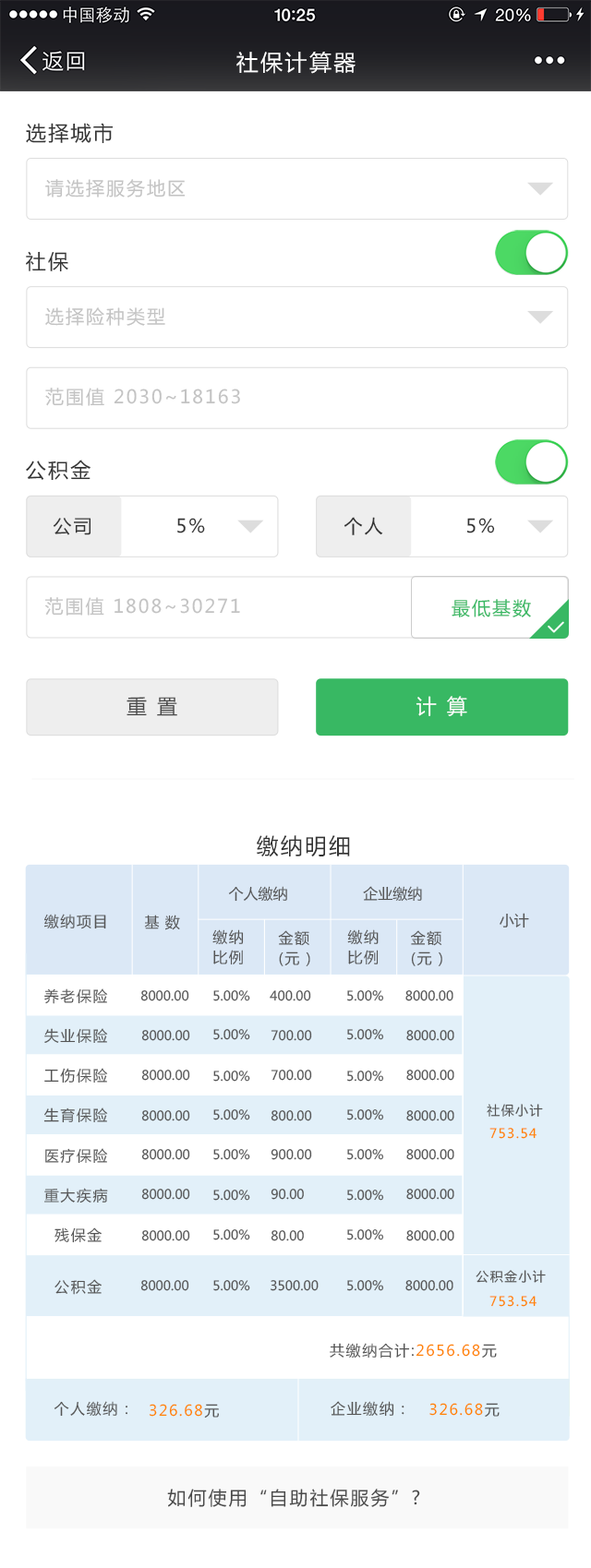
<style>
.page{position:relative;width:591px;height:1568px;background:#ffffff}
.page>*{position:absolute;margin:0}
.t1{font:22.1px "MicrosoftYaHei";letter-spacing:0.1em;color:#ffffff}
.t2{font:20.3px "MicrosoftYaHei";letter-spacing:0.1em;color:#333333}
.t3{font:18.5px "MicrosoftYaHei";letter-spacing:0.1em;color:#c3c3c3}
.t4{font:18.5px "MicrosoftYaHei";letter-spacing:0.1em;color:#333333}
.t5{font:18.5px "MicrosoftYaHei";letter-spacing:0.1em;color:#38b863}
.t6{font:20.3px "MicrosoftYaHei";letter-spacing:0.1em;color:#494949}
.t7{font:20.3px "MicrosoftYaHei";letter-spacing:0.1em;color:#ffffff}
.t8{font:21.9px "MicrosoftYaHei";letter-spacing:0.1em;color:#333333}
.t9{font:14.8px "MicrosoftYaHei";color:#555555}
.t10{font:14.8px "MicrosoftYaHei";letter-spacing:0.1em;color:#555555}
.t11{font:14.8px "MicrosoftYaHei";letter-spacing:0.4em;color:#555555}
.t12{font:14.8px/20px "MicrosoftYaHei";letter-spacing:0.1em;color:#555555}
.t13{font:12.9px "MicrosoftYaHei";color:#555555}
.t14{font:12.9px "MicrosoftYaHei";letter-spacing:0.1em;color:#555555}
.t15{font:12.9px "MicrosoftYaHei";letter-spacing:0.1em;color:#ff8400}
.t16{font:14.8px "MicrosoftYaHei";letter-spacing:0.1em;color:#ff8400}
.t17{font:18.5px "MicrosoftYaHei";letter-spacing:0.1em;color:#494949}
</style>
<div class="page">
<p class="t1" style="left:236px;top:52px;width:119px;height:22px">社保计算器</p>
<p class="t2" style="left:26px;top:123px;width:88px;height:21px">选择城市</p>
<p class="t3" style="left:45px;top:179px;width:141px;height:18px">请选择服务地区</p>
<p class="t2" style="left:26px;top:251px;width:42px;height:21px">社保</p>
<p class="t3" style="left:45px;top:307px;width:120px;height:19px">选择险种类型</p>
<p class="t3" style="left:45px;top:388px;width:195px;height:18px">范围值 2030~18163</p>
<p class="t2" style="left:26px;top:460px;width:64px;height:21px">公积金</p>
<p class="t4" style="left:53px;top:518px;width:38px;height:17px">公司</p>
<p class="t4" style="left:177px;top:518px;width:28px;height:15px">5%</p>
<p class="t4" style="left:343px;top:517px;width:40px;height:18px">个人</p>
<p class="t4" style="left:466px;top:518px;width:29px;height:15px">5%</p>
<p class="t3" style="left:45px;top:597px;width:195px;height:19px">范围值 1808~30271</p>
<p class="t5" style="left:451px;top:599px;width:80px;height:18px">最低基数</p>
<p class="t6" style="left:126px;top:697px;width:51px;height:19px">重 置</p>
<p class="t7" style="left:415px;top:696px;width:52px;height:20px">计 算</p>
<p class="t8" style="left:257px;top:835px;width:93px;height:22px">缴纳明细</p>
<p class="t9" style="left:228px;top:886px;width:59px;height:16px">个人缴纳</p>
<p class="t9" style="left:363px;top:886px;width:59px;height:16px">企业缴纳</p>
<p class="t10" style="left:44px;top:914px;width:62px;height:15px">缴纳项目</p>
<p class="t11" style="left:144px;top:915px;width:36px;height:15px">基数</p>
<p class="t9" style="left:499px;top:913px;width:30px;height:15px">小计</p>
<p class="t12" style="left:212px;top:929px;width:32px;height:36px">缴纳<br>比例</p>
<p class="t12" style="left:347px;top:929px;width:31px;height:35px">缴纳<br>比例</p>
<p class="t12" style="left:278px;top:930px;width:32px;height:36px">金额<br>(元）</p>
<p class="t12" style="left:411px;top:930px;width:31px;height:36px">金额<br>(元）</p>
<p class="t10" style="left:44px;top:988px;width:64px;height:16px">养老保险</p>
<p class="t13" style="left:140px;top:990px;width:49px;height:11px">8000.00</p>
<p class="t13" style="left:213px;top:990px;width:37px;height:11px">5.00%</p>
<p class="t13" style="left:269px;top:990px;width:42px;height:11px">400.00</p>
<p class="t13" style="left:347px;top:990px;width:37px;height:11px">5.00%</p>
<p class="t13" style="left:405px;top:990px;width:48px;height:11px">8000.00</p>
<p class="t10" style="left:44px;top:1028px;width:64px;height:16px">失业保险</p>
<p class="t13" style="left:141px;top:1030px;width:49px;height:11px">8000.00</p>
<p class="t13" style="left:213px;top:1029px;width:37px;height:11px">5.00%</p>
<p class="t13" style="left:270px;top:1030px;width:42px;height:11px">700.00</p>
<p class="t13" style="left:347px;top:1029px;width:37px;height:11px">5.00%</p>
<p class="t13" style="left:406px;top:1030px;width:48px;height:11px">8000.00</p>
<p class="t10" style="left:44px;top:1068px;width:64px;height:15px">工伤保险</p>
<p class="t13" style="left:141px;top:1070px;width:49px;height:11px">8000.00</p>
<p class="t13" style="left:213px;top:1071px;width:37px;height:11px">5.00%</p>
<p class="t13" style="left:270px;top:1070px;width:42px;height:11px">700.00</p>
<p class="t13" style="left:347px;top:1071px;width:37px;height:11px">5.00%</p>
<p class="t13" style="left:406px;top:1070px;width:48px;height:11px">8000.00</p>
<p class="t10" style="left:43px;top:1107px;width:65px;height:16px">生育保险</p>
<p class="t13" style="left:213px;top:1109px;width:37px;height:11px">5.00%</p>
<p class="t13" style="left:347px;top:1109px;width:37px;height:11px">5.00%</p>
<p class="t14" style="left:486px;top:1104px;width:57px;height:13px">社保小计</p>
<p class="t13" style="left:141px;top:1110px;width:49px;height:11px">8000.00</p>
<p class="t13" style="left:270px;top:1110px;width:42px;height:11px">800.00</p>
<p class="t13" style="left:406px;top:1110px;width:48px;height:11px">8000.00</p>
<p class="t15" style="left:489px;top:1128px;width:47px;height:11px">753.54</p>
<p class="t10" style="left:45px;top:1148px;width:63px;height:16px">医疗保险</p>
<p class="t13" style="left:141px;top:1149px;width:49px;height:11px">8000.00</p>
<p class="t13" style="left:213px;top:1149px;width:37px;height:11px">5.00%</p>
<p class="t13" style="left:270px;top:1149px;width:42px;height:11px">900.00</p>
<p class="t13" style="left:347px;top:1149px;width:37px;height:11px">5.00%</p>
<p class="t13" style="left:406px;top:1149px;width:48px;height:11px">8000.00</p>
<p class="t10" style="left:44px;top:1188px;width:64px;height:15px">重大疾病</p>
<p class="t13" style="left:141px;top:1189px;width:49px;height:11px">8000.00</p>
<p class="t13" style="left:213px;top:1190px;width:37px;height:11px">5.00%</p>
<p class="t13" style="left:270px;top:1189px;width:34px;height:11px">90.00</p>
<p class="t13" style="left:347px;top:1190px;width:37px;height:11px">5.00%</p>
<p class="t13" style="left:406px;top:1189px;width:48px;height:11px">8000.00</p>
<p class="t10" style="left:54px;top:1227px;width:48px;height:16px">残保金</p>
<p class="t13" style="left:213px;top:1229px;width:37px;height:11px">5.00%</p>
<p class="t13" style="left:347px;top:1229px;width:37px;height:11px">5.00%</p>
<p class="t13" style="left:141px;top:1230px;width:49px;height:11px">8000.00</p>
<p class="t13" style="left:270px;top:1230px;width:34px;height:11px">80.00</p>
<p class="t13" style="left:406px;top:1230px;width:48px;height:11px">8000.00</p>
<p class="t14" style="left:475px;top:1270px;width:70px;height:13px">公积金小计</p>
<p class="t10" style="left:54px;top:1279px;width:48px;height:16px">公积金</p>
<p class="t13" style="left:140px;top:1280px;width:49px;height:11px">8000.00</p>
<p class="t13" style="left:213px;top:1280px;width:37px;height:11px">5.00%</p>
<p class="t13" style="left:270px;top:1280px;width:48px;height:11px">3500.00</p>
<p class="t13" style="left:347px;top:1280px;width:37px;height:11px">5.00%</p>
<p class="t13" style="left:405px;top:1280px;width:48px;height:11px">8000.00</p>
<p class="t15" style="left:489px;top:1296px;width:47px;height:11px">753.54</p>
<p class="t16" style="left:329px;top:1343px;width:168px;height:16px"><span class="t10">共缴纳合计:</span>2656.68<span class="t10">元</span></p>
<p class="t10" style="left:54px;top:1401px;width:73px;height:16px">个人缴纳：</p>
<p class="t16" style="left:149px;top:1404px;width:70px;height:14px">326.68<span class="t10">元</span></p>
<p class="t10" style="left:330px;top:1401px;width:74px;height:16px">企业缴纳：</p>
<p class="t16" style="left:429px;top:1403px;width:70px;height:14px">326.68<span class="t10">元</span></p>
<p class="t17" style="left:167px;top:1489px;width:253px;height:18px">如何使用“自助社保服务”?</p>
</div>
